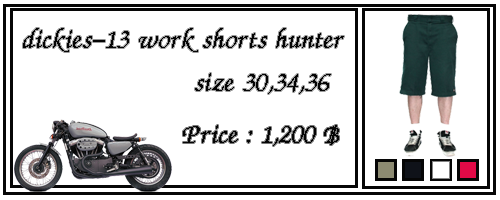
<style>
.page{position:relative;width:500px;height:200px;background:#ffffff}
.page>*{position:absolute;margin:0}
.t1{font:36px "DSUMonTaNa";color:#050505}
</style>
<div class="page">
<p class="t1" style="left:23px;top:28px;width:321px;height:66px">dickies-13 work shorts hunter<br>      size 30,34,36</p>
<p class="t1" style="left:183px;top:125px;width:156px;height:21px">Price : 1,200 ฿</p>
</div>
